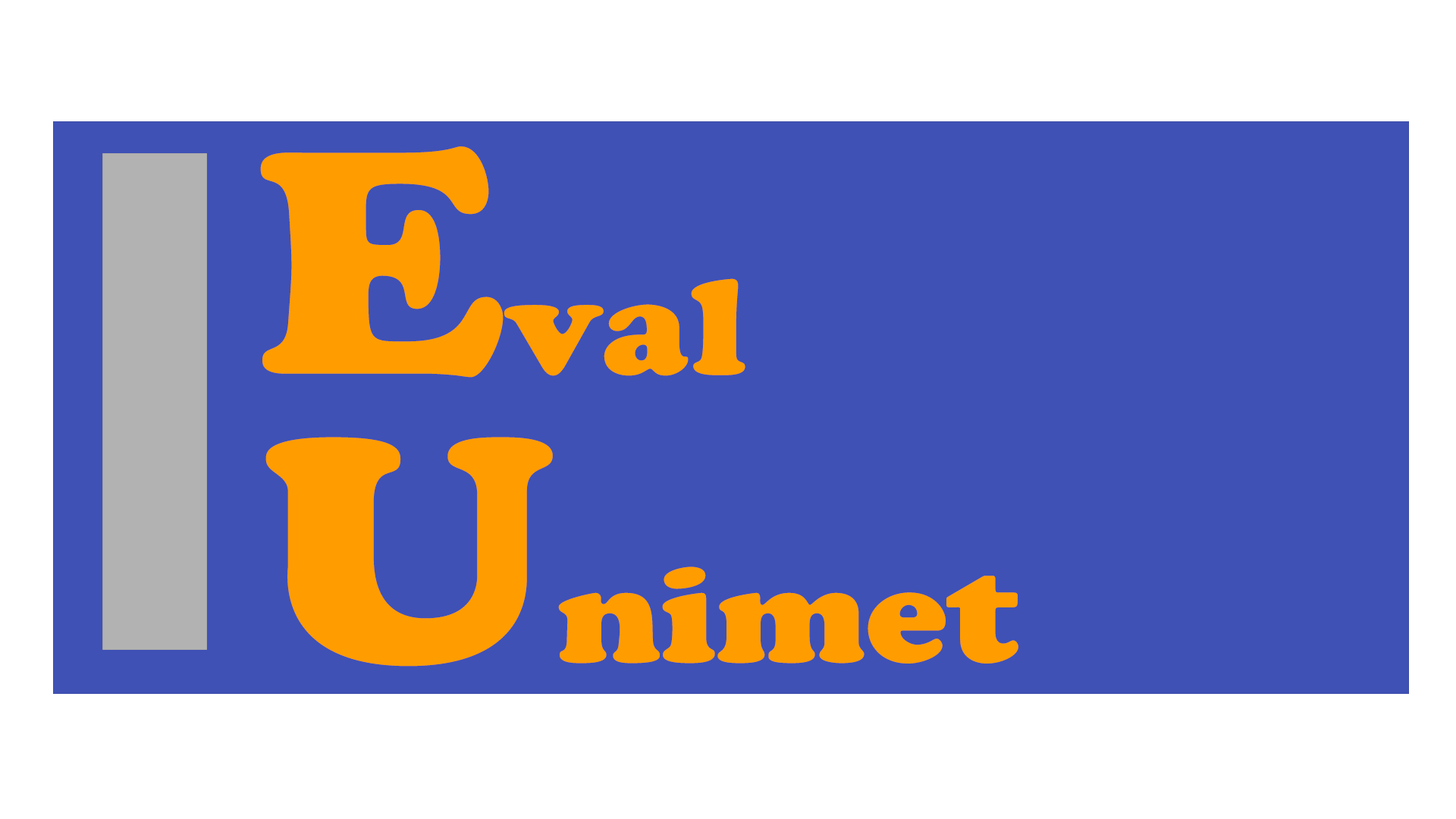
<style>
.page{position:relative;width:1456px;height:819px;background:#3f51b5}
.page>*{position:absolute;margin:0}
.t1{font:135px "CooperBlackStd";color:#ff9c00;scale:1.09 1}
.t2{font:314.9px "CooperBlackStd";color:#ff9c00;scale:1.09 1}
</style>
<div class="page">
<p class="t1" style="left:260px;top:146px;width:485px;height:232px"><span class="t2">E</span>val</p>
<p class="t1" style="left:265px;top:437px;width:753px;height:230px"><span class="t2">U</span>nimet</p>
</div>
